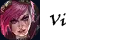
<style>
.page{position:relative;width:140px;height:40px;background:#ffffff}
.page>*{position:absolute;margin:0}
.t1{font:16px "VinerHandITC";color:#000000}
</style>
<div class="page">
<p class="t1" style="left:49px;top:13px;width:17px;height:14px">Vi</p>
</div>
